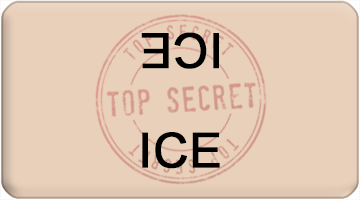
<style>
.page{position:relative;width:360px;height:200px;background:#e8d0bb}
.page>*{position:absolute;margin:0}
.t1{font:48px "ArialMT";color:#000000;font-weight:bold}
</style>
<div class="page">
<p class="t1" style="left:141px;top:32px;width:78px;height:37px;rotate:180deg">ICE</p>
<p class="t1" style="left:142px;top:132px;width:78px;height:37px">ICE</p>
</div>
